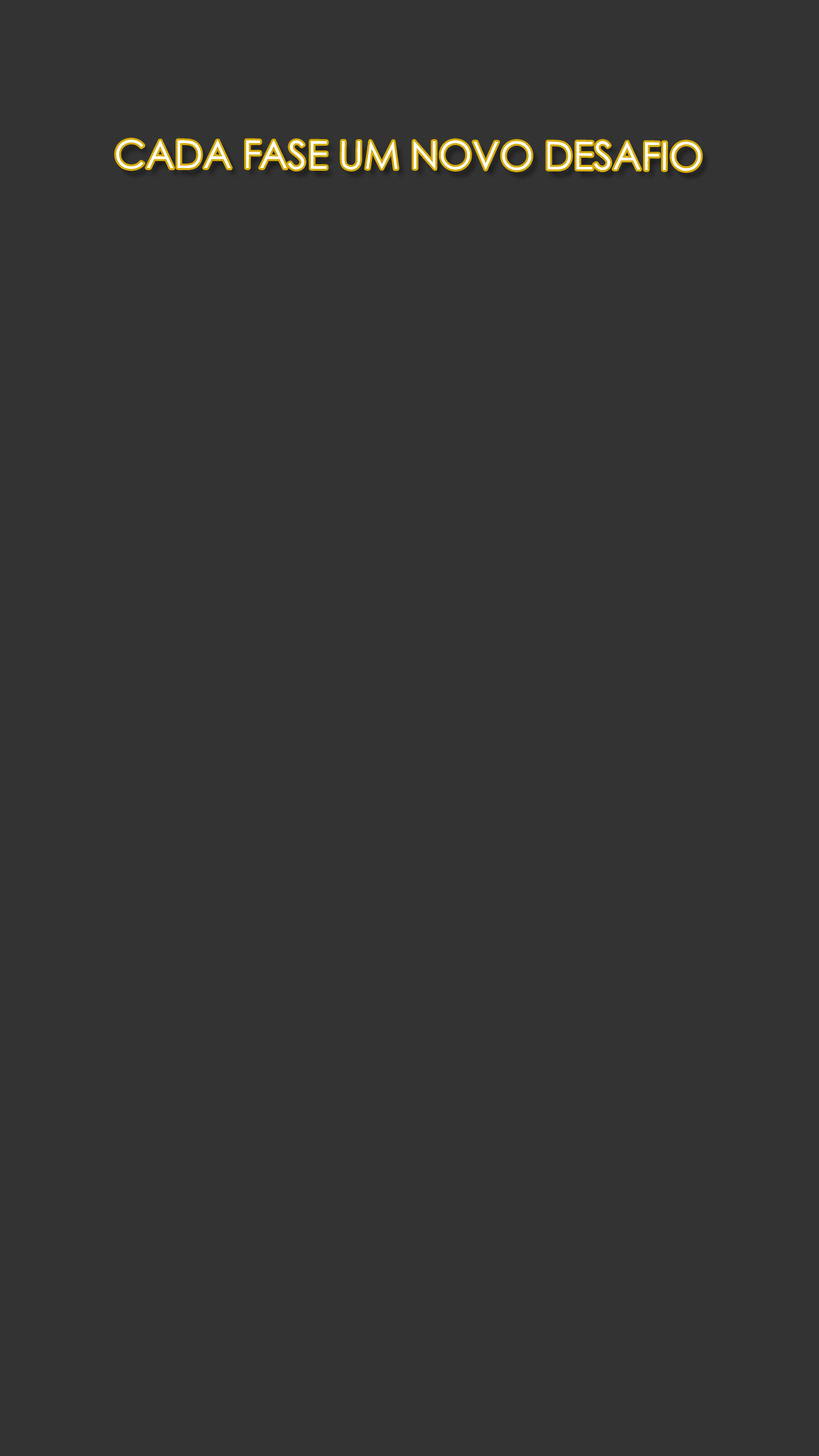
<style>
.page{position:relative;width:819px;height:1456px;background:#333333}
.page>*{position:absolute;margin:0}
.t1{font:38.7px "CenturyGothic";color:#ffffff;text-transform:uppercase}
</style>
<div class="page">
<p class="t1" style="left:116px;top:139px;width:585px;height:32px">Cada fase um novo desafio</p>
</div>
